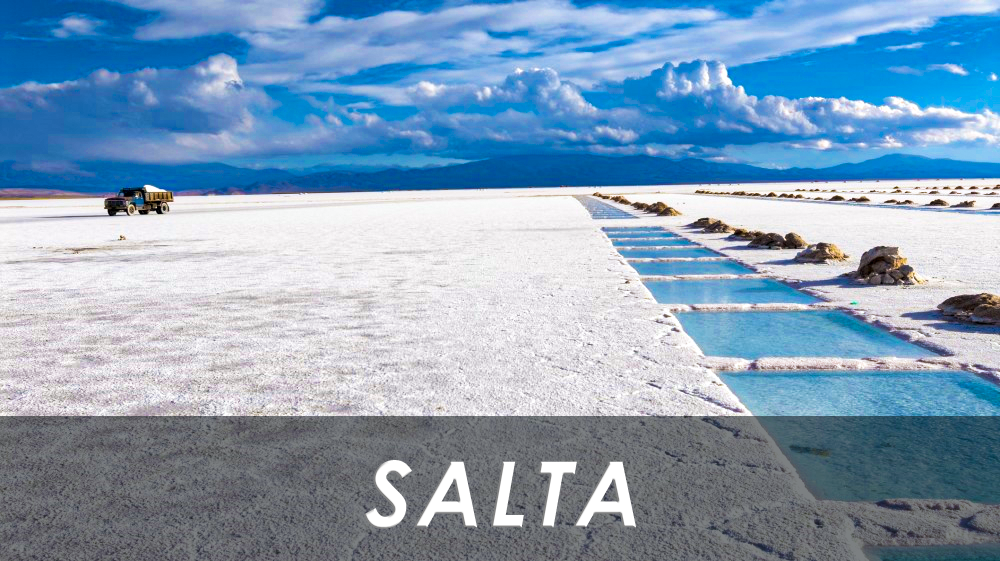
<style>
.page{position:relative;width:1000px;height:561px}
.page>*{position:absolute;margin:0}
.t1{font:90.9px "CenturyGothic-Bold";letter-spacing:0.05em;color:#ffffff;font-style:italic}
</style>
<div class="page">
<p class="t1" style="left:364px;top:460px;width:272px;height:69px">SALTA</p>
</div>
